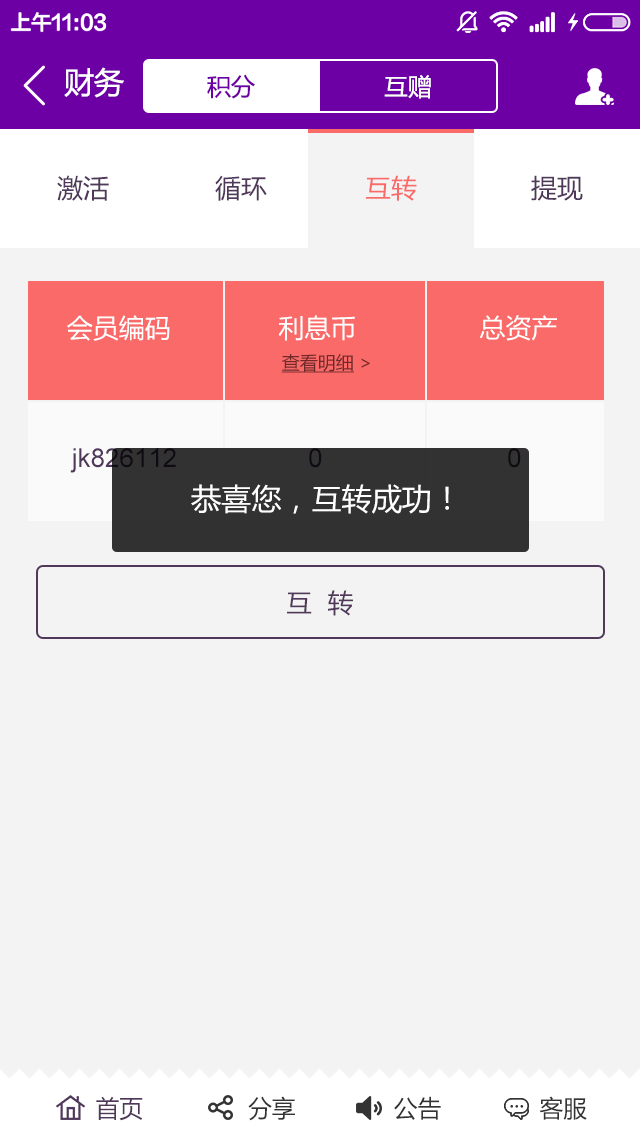
<style>
.page{position:relative;width:640px;height:1136px;background:#f3f3f3}
.page>*{position:absolute;margin:0}
.t1{font:30px "MicrosoftYaHei";color:#ffffff}
.t2{font:24px "MicrosoftYaHei";color:#6d00a5}
.t3{font:24px "MicrosoftYaHei";color:#ffffff}
.t4{font:26px "MicrosoftYaHei";color:#50385b}
.t5{font:26px "MicrosoftYaHei";color:#f96a69}
.t6{font:26px "MicrosoftYaHei";color:#ffffff}
.t7{font:18px "MicrosoftYaHei";color:#6f2928;text-decoration:underline}
.t8{font:18px "MicrosoftYaHei";color:#6f2928}
.t9{font:24px "MicrosoftYaHei";color:#333333}
.t10{font:24px "MicrosoftYaHei";color:#50385b}
</style>
<div class="page">
<p class="t1" style="left:64px;top:67px;width:60px;height:31px">财务</p>
<p class="t2" style="left:207px;top:74px;width:48px;height:25px">积分</p>
<p class="t3" style="left:384px;top:75px;width:47px;height:24px">互赠</p>
<p class="t4" style="left:57px;top:175px;width:52px;height:26px">激活</p>
<p class="t4" style="left:215px;top:175px;width:52px;height:26px">循环</p>
<p class="t5" style="left:366px;top:175px;width:51px;height:26px">互转</p>
<p class="t4" style="left:531px;top:175px;width:52px;height:26px">提现</p>
<p class="t6" style="left:67px;top:315px;width:490px;height:26px">会员编码              利息币                总资产</p>
<p class="t7" style="left:281px;top:354px;width:89px;height:19px">查看明细<span class="t8"> &gt;</span></p>
<p class="t1" style="left:191px;top:484px;width:258px;height:30px">恭喜您，互转成功！</p>
<p class="t4" style="left:287px;top:590px;width:66px;height:26px">互  转</p>
<p class="t9" style="left:96px;top:1096px;width:491px;height:25px"><span class="t10">首页</span>               分享              公告              客服</p>
</div>
